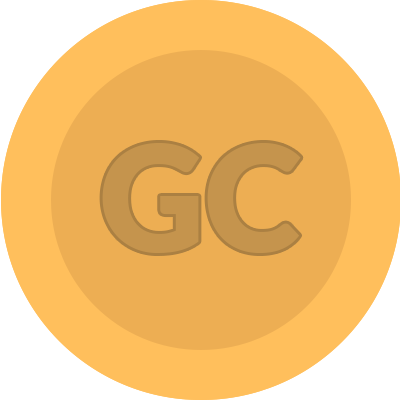
<style>
.page{position:relative;width:400px;height:400px;background:#edae53}
.page>*{position:absolute;margin:0}
.t1{font:146.7px "Lato-Black";color:#c5944d}
</style>
<div class="page">
<p class="t1" style="left:102px;top:143px;width:199px;height:110px">GC</p>
</div>
